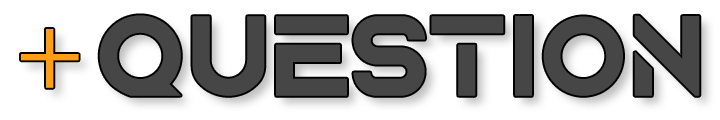
<style>
.page{position:relative;width:720px;height:120px;background:#ffffff}
.page>*{position:absolute;margin:0}
.t1{font:120px "AquireBold";color:#464646}
.t2{font:40px "Arial-Black";color:#0078a5}
.t3{font:120px "MinionPro-Regular";color:#ff9f18}
</style>
<div class="page">
<p class="t1" style="left:99px;top:15px;width:601px;height:81px"><span class="t2"> <br></span>QUESTION</p>
<p class="t3" style="left:21px;top:29px;width:58px;height:59px"><span class="t2"> <br></span>+</p>
</div>
